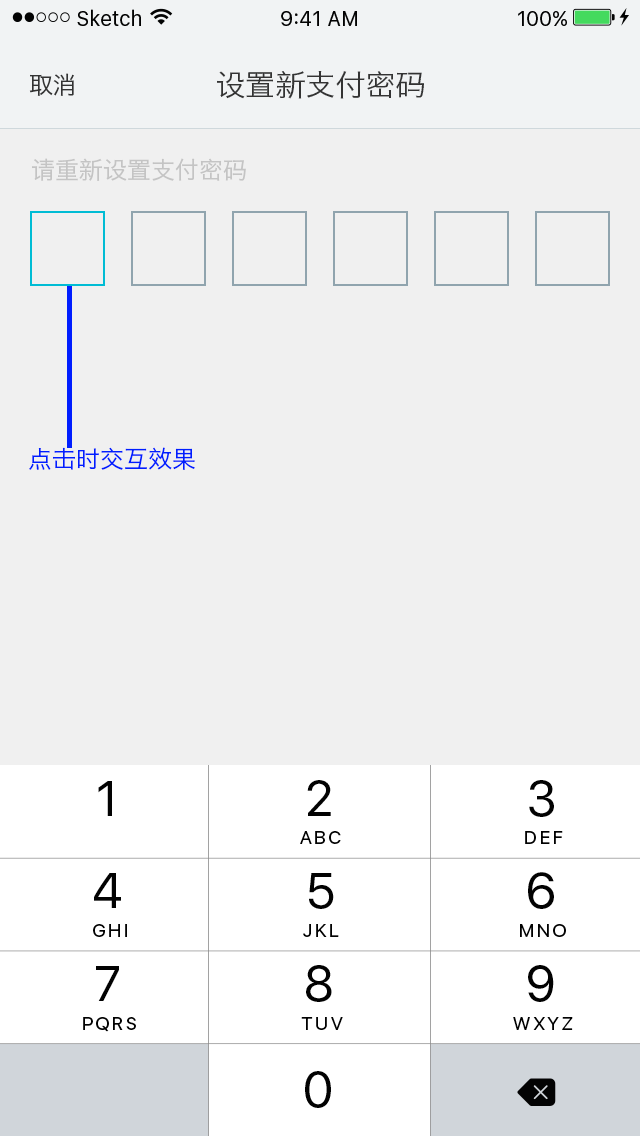
<style>
.page{position:relative;width:640px;height:1136px;background:#f0f0f0}
.page>*{position:absolute;margin:0}
.t1{font:24px "HiraginoSansGB-W3";color:#333333}
.t2{font:30px "HiraginoSansGB-W3";color:#333333}
.t3{font:24px "HiraginoSansGB-W3";color:#c4c4c4}
.t4{font:24px "HiraginoSansGB-W3";color:#001eff}
</style>
<div class="page">
<p class="t1" style="left:29px;top:73px;width:45px;height:23px">取消</p>
<p class="t2" style="left:217px;top:71px;width:207px;height:28px">设置新支付密码</p>
<p class="t3" style="left:32px;top:158px;width:214px;height:23px">请重新设置支付密码</p>
<p class="t4" style="left:29px;top:447px;width:166px;height:23px">点击时交互效果</p>
</div>
